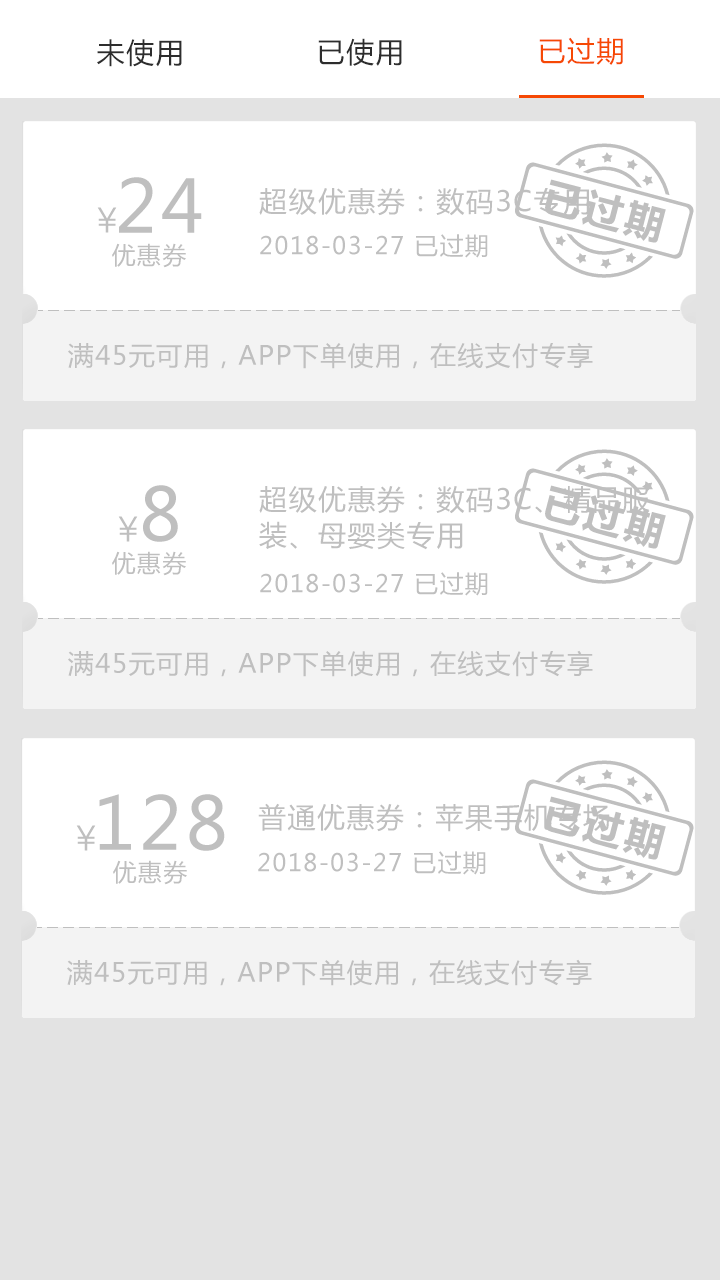
<style>
.page{position:relative;width:720px;height:1280px;background:#ffffff}
.page>*{position:absolute;margin:0}
.t1{font:28px "MicrosoftYaHei";letter-spacing:0.055em;color:#2d2d2d;text-transform:uppercase}
.t2{font:28px "MicrosoftYaHei";letter-spacing:0.055em;color:#f64804;text-transform:uppercase}
.t3{font:72px "MicrosoftYaHei";letter-spacing:0.055em;color:#bfbfbf;text-transform:uppercase}
.t4{font:28px "MicrosoftYaHei";letter-spacing:0.055em;color:#bfbfbf;text-transform:uppercase}
.t5{font:24px "MicrosoftYaHei";letter-spacing:0.055em;color:#bfbfbf;text-transform:uppercase}
.t6{font:26px "MicrosoftYaHei";letter-spacing:0.055em;color:#bfbfbf;text-transform:uppercase}
.t7{font:28px/36px "MicrosoftYaHei";letter-spacing:0.055em;color:#bfbfbf;text-transform:uppercase}
</style>
<div class="page">
<p class="t1" style="left:97px;top:39px;width:85px;height:28px">未使用</p>
<p class="t1" style="left:318px;top:38px;width:84px;height:28px">已使用</p>
<p class="t2" style="left:539px;top:37px;width:84px;height:28px">已过期</p>
<p class="t3" style="left:119px;top:177px;width:83px;height:56px">24</p>
<p class="t4" style="left:259px;top:188px;width:330px;height:28px">超级优惠券：数码3C专用</p>
<p class="t5" style="left:112px;top:243px;width:74px;height:25px">优惠券</p>
<p class="t5" style="left:260px;top:234px;width:228px;height:24px">2018-03-27 已过期</p>
<p class="t6" style="left:68px;top:342px;width:525px;height:27px">满45元可用，APP下单使用，在线支付专享</p>
<p class="t3" style="left:143px;top:485px;width:35px;height:57px">8</p>
<p class="t7" style="left:259px;top:486px;width:391px;height:64px">超级优惠券：数码3C、精品服<br>装、母婴类专用</p>
<p class="t5" style="left:112px;top:551px;width:74px;height:25px">优惠券</p>
<p class="t5" style="left:260px;top:572px;width:228px;height:24px">2018-03-27 已过期</p>
<p class="t6" style="left:68px;top:650px;width:525px;height:27px">满45元可用，APP下单使用，在线支付专享</p>
<p class="t3" style="left:99px;top:794px;width:126px;height:57px">128</p>
<p class="t4" style="left:258px;top:803px;width:352px;height:29px">普通优惠券：苹果手机专场</p>
<p class="t5" style="left:258px;top:851px;width:228px;height:24px">2018-03-27 已过期</p>
<p class="t5" style="left:113px;top:860px;width:74px;height:25px">优惠券</p>
<p class="t6" style="left:67px;top:959px;width:525px;height:27px">满45元可用，APP下单使用，在线支付专享</p>
</div>
